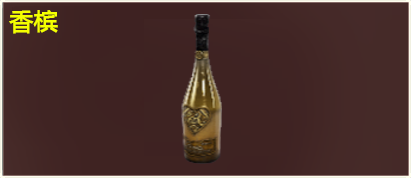
<style>
.page{position:relative;width:411px;height:178px}
.page>*{position:absolute;margin:0}
.t1{font:24px "MicrosoftYaHeiUI";color:#f4ff00;font-weight:bold}
</style>
<div class="page">
<p class="t1" style="left:9px;top:10px;width:49px;height:24px">香槟</p>
</div>
